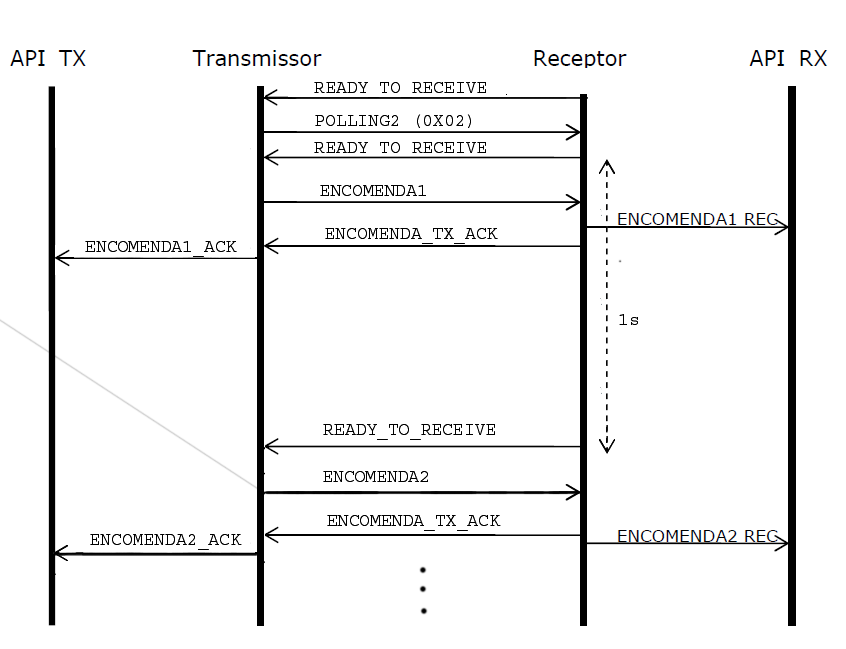
<style>
.page{position:relative;width:846px;height:649px;background:#ffffff}
.page>*{position:absolute;margin:0}
.t1{font:18px "Courier";color:#000000}
</style>
<div class="page">
<p class="t1" style="left:314px;top:82px;width:172px;height:16px">READY_TO_RECEIVE</p>
<p class="t1" style="left:315px;top:114px;width:156px;height:14px">POLLING2 (0X02)</p>
<p class="t1" style="left:320px;top:185px;width:106px;height:11px">ENCOMENDA1</p>
<p class="t1" style="left:325px;top:228px;width:173px;height:16px">ENCOMENDA_TX_ACK</p>
<p class="t1" style="left:85px;top:241px;width:152px;height:16px">ENCOMENDA1_ACK</p>
<p class="t1" style="left:619px;top:314px;width:19px;height:11px">1s</p>
<p class="t1" style="left:323px;top:424px;width:172px;height:16px">READY_TO_RECEIVE</p>
<p class="t1" style="left:323px;top:471px;width:105px;height:11px">ENCOMENDA2</p>
<p class="t1" style="left:327px;top:515px;width:174px;height:16px">ENCOMENDA_TX_ACK</p>
<p class="t1" style="left:90px;top:534px;width:152px;height:16px">ENCOMENDA2_ACK</p>
</div>
